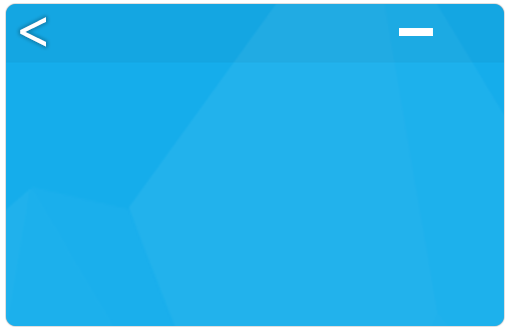
<style>
.page{position:relative;width:510px;height:330px;background:#22b2ec}
.page>*{position:absolute;margin:0}
.t1{font:48px "AdobeHeitiStd-Regular";color:#ffffff}
</style>
<div class="page">
<p class="t1" style="left:20px;top:17px;width:26px;height:30px">&lt;</p>
</div>
